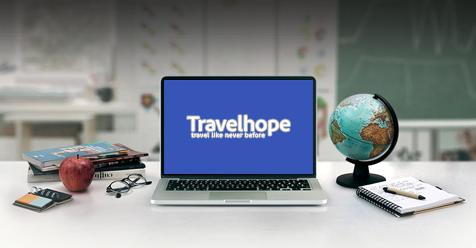
<style>
.page{position:relative;width:476px;height:248px}
.page>*{position:absolute;margin:0}
.t1{font:22.2px "AdobeClean-Bold";letter-spacing:-0.02em;color:#ffffff;scale:1.03 1}
.t2{font:5.9px "AdobeClean-Light";letter-spacing:0.1em;color:#ffffff;scale:1.11 1}
</style>
<div class="page">
<p class="t1" style="left:187px;top:115px;width:103px;height:21px">Travelhope</p>
<p class="t2" style="left:191px;top:132px;width:74px;height:6px">travel like never before</p>
</div>
